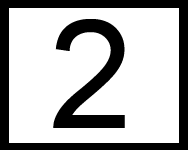
<style>
.page{position:relative;width:188px;height:150px;background:#ffffff}
.page>*{position:absolute;margin:0}
.t1{font:150px "ArialMT";color:#000000}
</style>
<div class="page">
<p class="t1" style="left:53px;top:19px;width:72px;height:109px">2</p>
</div>
